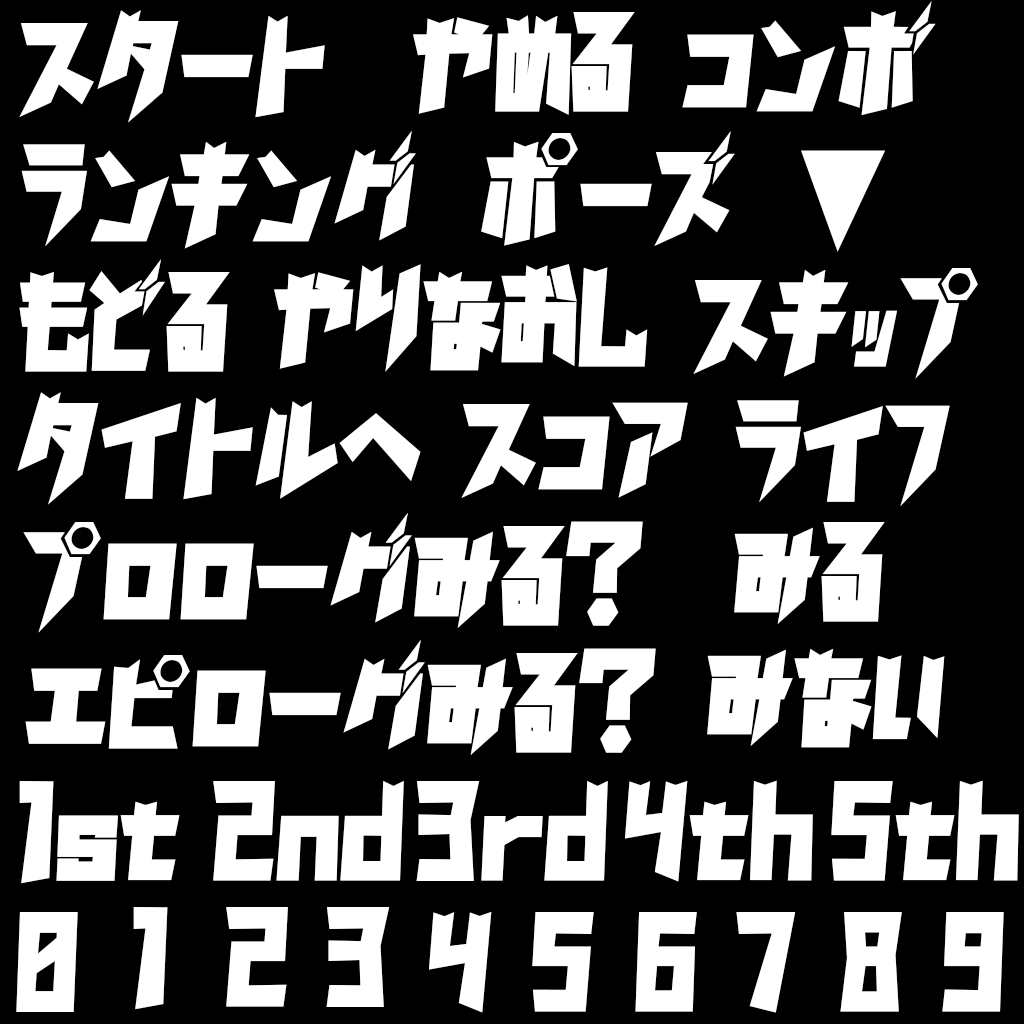
<style>
.page{position:relative;width:1024px;height:1024px;background:#000000}
.page>*{position:absolute;margin:0}
.t1{font:128px "GN-KagakuGothic";color:#ffffff}
</style>
<div class="page">
<p class="t1" style="left:682px;top:1px;width:254px;height:114px">コンボ</p>
<p class="t1" style="left:19px;top:10px;width:306px;height:113px">スタート</p>
<p class="t1" style="left:413px;top:12px;width:222px;height:103px">やめる</p>
<p class="t1" style="left:21px;top:131px;width:395px;height:118px">ランキング</p>
<p class="t1" style="left:481px;top:131px;width:254px;height:115px">ポーズ</p>
<p class="t1" style="left:801px;top:150px;width:84px;height:102px">▼</p>
<p class="t1" style="left:19px;top:259px;width:211px;height:113px">もどる</p>
<p class="t1" style="left:274px;top:264px;width:374px;height:108px">やりなおし</p>
<p class="t1" style="left:693px;top:268px;width:285px;height:111px">スキップ</p>
<p class="t1" style="left:17px;top:392px;width:404px;height:113px">タイトルへ</p>
<p class="t1" style="left:735px;top:400px;width:215px;height:106px">ライフ</p>
<p class="t1" style="left:461px;top:402px;width:227px;height:96px">スコア</p>
<p class="t1" style="left:23px;top:513px;width:620px;height:120px">プロローグみる？</p>
<p class="t1" style="left:734px;top:522px;width:151px;height:102px">みる</p>
<p class="t1" style="left:25px;top:640px;width:631px;height:115px">エピローグみる？</p>
<p class="t1" style="left:707px;top:648px;width:238px;height:100px">みない</p>
<p class="t1" style="left:19px;top:781px;width:161px;height:103px">1st</p>
<p class="t1" style="left:213px;top:781px;width:191px;height:100px">2nd</p>
<p class="t1" style="left:416px;top:781px;width:192px;height:100px">3rd</p>
<p class="t1" style="left:625px;top:780px;width:188px;height:102px">4th</p>
<p class="t1" style="left:831px;top:780px;width:188px;height:101px">5th</p>
<p class="t1" style="left:16px;top:912px;width:62px;height:100px">0</p>
<p class="t1" style="left:133px;top:907px;width:35px;height:103px">1</p>
<p class="t1" style="left:226px;top:907px;width:62px;height:100px">2</p>
<p class="t1" style="left:326px;top:907px;width:64px;height:100px">3</p>
<p class="t1" style="left:429px;top:912px;width:63px;height:101px">4</p>
<p class="t1" style="left:532px;top:912px;width:62px;height:100px">5</p>
<p class="t1" style="left:635px;top:912px;width:62px;height:100px">6</p>
<p class="t1" style="left:736px;top:912px;width:60px;height:101px">7</p>
<p class="t1" style="left:840px;top:912px;width:62px;height:100px">8</p>
<p class="t1" style="left:942px;top:912px;width:62px;height:100px">9</p>
</div>
